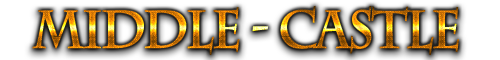
<style>
.page{position:relative;width:500px;height:60px;background:#ffffff}
.page>*{position:absolute;margin:0}
.t1{font:53.3px "CharlemagneStd-Bold";letter-spacing:-0.08em;font-weight:bold;scale:0.91 1}
</style>
<div class="page">
<p class="t1" style="left:32px;top:5px;width:427px;height:50px">middle - castle</p>
</div>
